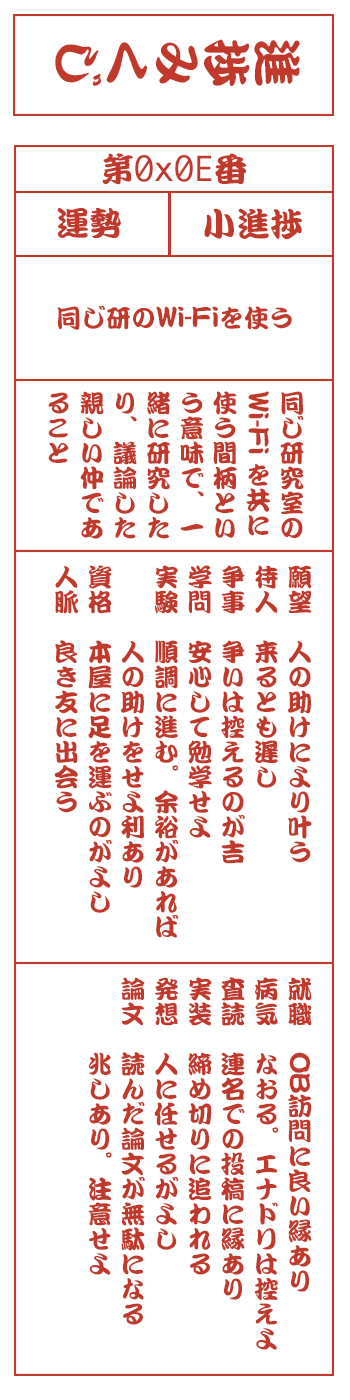
<style>
.page{position:relative;width:350px;height:1400px;background:#ffffff}
.page>*{position:absolute;margin:0}
.t1{font:50px "DFKanTeiRyu-XB-MP-RKSJ-H";color:#c0392b}
.t2{font:33.3px "Monaco";color:#c0392b}
.t3{font:33.3px "DFKanTeiRyu-XB-MP-RKSJ-H";color:#c0392b}
.t4{font:25px "DFKanTeiRyu-XB-MP-RKSJ-H";color:#c0392b}
.t5{font:25px/33.3px "DFKanTeiRyu-XB-MP-RKSJ-H";color:#c0392b}
</style>
<div class="page">
<p class="t1" style="left:55px;top:39px;width:245px;height:47px;rotate:90deg">進捗みくじ</p>
<p class="t2" style="left:102px;top:153px;width:144px;height:32px"><span class="t3">第</span>0x0E<span class="t3">番</span></p>
<p class="t3" style="left:57px;top:207px;width:64px;height:31px">運勢</p>
<p class="t3" style="left:204px;top:208px;width:98px;height:32px">小進捗</p>
<p class="t4" style="left:57px;top:305px;width:235px;height:25px">同じ研のWi-Fiを使う</p>
<p class="t5" style="left:48px;top:391px;width:256px;height:148px">同じ研究室の<br>Wi-Fi を共に<br>使う間柄とい<br>う意味で、一<br>緒に研究した<br>り、議論した<br>親しい仲であ<br>ること</p>
<p class="t5" style="left:54px;top:565px;width:258px;height:373px">願望　人の助けにより叶う<br>待人　来るとも遅し<br>争事　争いは控えるのが吉<br>学問　安心して勉学せよ<br>実験　順調に進む。余裕があれば<br>　　　人の助けをせよ利あり<br>資格　本屋に足を運ぶのがよし<br>人脈　良き友に出会う</p>
<p class="t5" style="left:88px;top:977px;width:224px;height:373px">就職　OB訪問に良い縁あり<br>病気　なおる。エナドリは控えよ<br>査読　連名での投稿に縁あり<br>実装　締め切りに追われる<br>発想　人に任せるがよし<br>論文　読んだ論文が無駄になる<br>　　　兆しあり。注意せよ</p>
</div>
